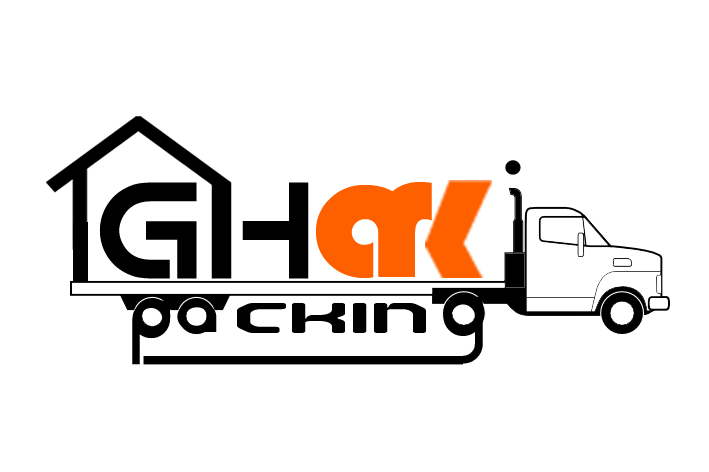
<style>
.page{position:relative;width:709px;height:472px;background:#ffffff}
.page>*{position:absolute;margin:0}
.t1{font:135.7px "Android";color:#000000}
.t2{font:184.3px "Bauhaus93";color:#fe6000;scale:1.04 1}
.t3{font:192.2px "Bauhaus93";color:#fe6000;scale:1.04 1}
.t4{font:53.6px "Cerebro";color:#000000}
.t5{font:44.1px "Cerebro";color:#000000;scale:1.26 1}
.t6{font:56.1px "StreetMovementRounded-Bold";color:#000000;scale:2.16 1}
.t7{font:56.2px "Cerebro";color:#000000}
</style>
<div class="page">
<p class="t1" style="left:99px;top:182px;width:98px;height:97px">G</p>
<p class="t1" style="left:211px;top:182px;width:98px;height:97px;rotate:180deg">H</p>
<p class="t2" style="left:316px;top:185px;width:98px;height:93px">a</p>
<p class="t3" style="left:378px;top:182px;width:54px;height:95px">r</p>
<p class="t4" style="left:132px;top:300px;width:38px;height:65px">p</p>
<p class="t5" style="left:177px;top:301px;width:40px;height:31px">a</p>
<p class="t6" style="left:237px;top:303px;width:189px;height:30px">ckin</p>
<p class="t7" style="left:443px;top:296px;width:40px;height:68px">g</p>
</div>
